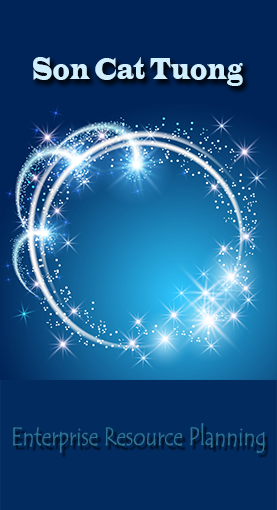
<style>
.page{position:relative;width:277px;height:510px;background:#022b5f}
.page>*{position:absolute;margin:0}
.t1{font:31.8px "LatinWide";color:#cfeefe;scale:0.54 1}
.t2{font:26.2px "TempusSansITC";color:#2f7390;scale:0.8 1}
</style>
<div class="page">
<p class="t1" style="left:33px;top:57px;width:210px;height:29px">Son Cat Tuong</p>
<p class="t2" style="left:13px;top:423px;width:252px;height:30px">Enterprise Resource Planning</p>
</div>
